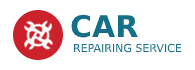
<style>
.page{position:relative;width:195px;height:70px;background:#ffffff}
.page>*{position:absolute;margin:0}
.t1{font:30px "DejaVuSans-Bold";color:#156f89}
.t2{font:11px "DejaVuSans";color:#156f89}
</style>
<div class="page">
<p class="t1" style="left:71px;top:14px;width:67px;height:24px">CAR</p>
<p class="t2" style="left:74px;top:43px;width:108px;height:10px">REPAIRING SERVICE</p>
</div>
